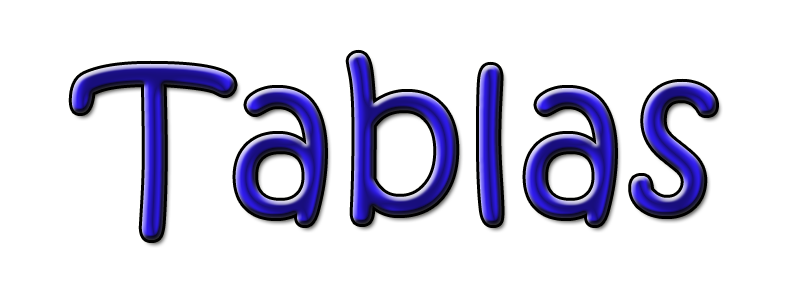
<style>
.page{position:relative;width:800px;height:300px;background:#ffffff}
.page>*{position:absolute;margin:0}
.t1{font:203.2px "KristenITC-Regular"}
</style>
<div class="page">
<p class="t1" style="left:71px;top:52px;width:645px;height:188px">Tablas</p>
</div>
